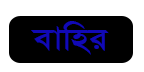
<style>
.page{position:relative;width:144px;height:72px;background:#000000}
.page>*{position:absolute;margin:0}
.t1{font:35.7px "SutonnyMJBold";color:#1109b6;scale:1.12 1}
</style>
<div class="page">
<p class="t1" style="left:31px;top:21px;width:78px;height:34px">evwni</p>
</div>
